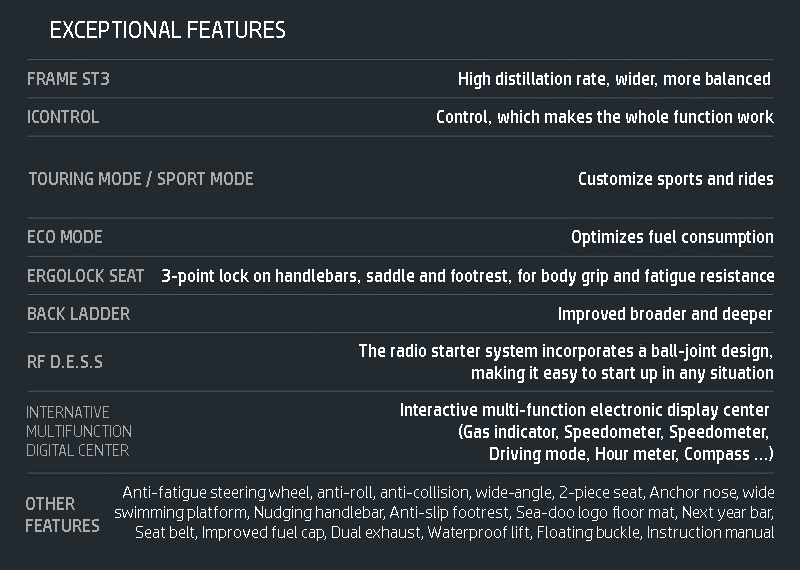
<style>
.page{position:relative;width:800px;height:570px;background:#22292f}
.page>*{position:absolute;margin:0}
.t1{font:24px "HPSimplified-Regular";color:#ffffff}
.t2{font:18px "HPSimplified-Regular";color:#ffffff}
.t3{font:18px "HPSimplified-Regular";color:#a9a9a9}
.t4{font:16px "HPSimplified-Regular";color:#a9a9a9}
.t5{font:17px "HPSimplified-Regular";color:#ffffff}
</style>
<div class="page">
<p class="t1" style="left:51px;top:21px;width:234px;height:17px">EXCEPTIONAL FEATURES</p>
<p class="t2" style="left:28px;top:72px;width:742px;height:17px"><span class="t3">FRAME ST3                                                                                       </span>High distillation rate, wider, more balanced</p>
<p class="t2" style="left:28px;top:110px;width:746px;height:15px"><span class="t3">ICONTROL</span>                                                                                    Control, which makes the whole function work</p>
<p class="t2" style="left:29px;top:171px;width:744px;height:18px"><span class="t3">TOURING MODE / SPORT MODE  </span>                                                                               Customize sports and rides</p>
<p class="t2" style="left:28px;top:230px;width:745px;height:17px"><span class="t3">ECO MODE</span>                                                                                                                     Optimizes fuel consumption</p>
<p class="t2" style="left:28px;top:269px;width:746px;height:17px"><span class="t3">ERGOLOCK SEAT  </span>  3-point lock on handlebars, saddle and footrest, for body grip and fatigue resistance</p>
<p class="t2" style="left:28px;top:307px;width:744px;height:17px"><span class="t3">BACK LADDER    </span>                                                                                                       Improved broader and deeper</p>
<p class="t2" style="left:359px;top:344px;width:414px;height:39px;text-align:right">The radio starter system incorporates a ball-joint design,<br>making it easy to start up in any situation</p>
<p class="t3" style="left:28px;top:355px;width:74px;height:13px">RF D.E.S.S</p>
<p class="t4" style="left:27px;top:406px;width:104px;height:50px">INTERNATIVE<br>MULTIFUNCTION DIGITAL CENTER</p>
<p class="t2" style="left:401px;top:403px;width:372px;height:61px;text-align:right">Interactive multi-function electronic display center <br>(Gas indicator, Speedometer, Speedometer, <br>Driving mode, Hour meter, Compass ...)</p>
<p class="t5" style="left:115px;top:486px;width:659px;height:55px;text-align:right">Anti-fatigue steering wheel, anti-roll, anti-collision, wide-angle, 2-piece seat, Anchor nose, wide swimming platform, Nudging handlebar, Anti-slip footrest, Sea-doo logo floor mat, Next year bar, Seat belt, Improved fuel cap, Dual exhaust, Waterproof lift, Floating buckle, Instruction manual</p>
<p class="t3" style="left:26px;top:497px;width:73px;height:35px">OTHER <br>FEATURES</p>
</div>
